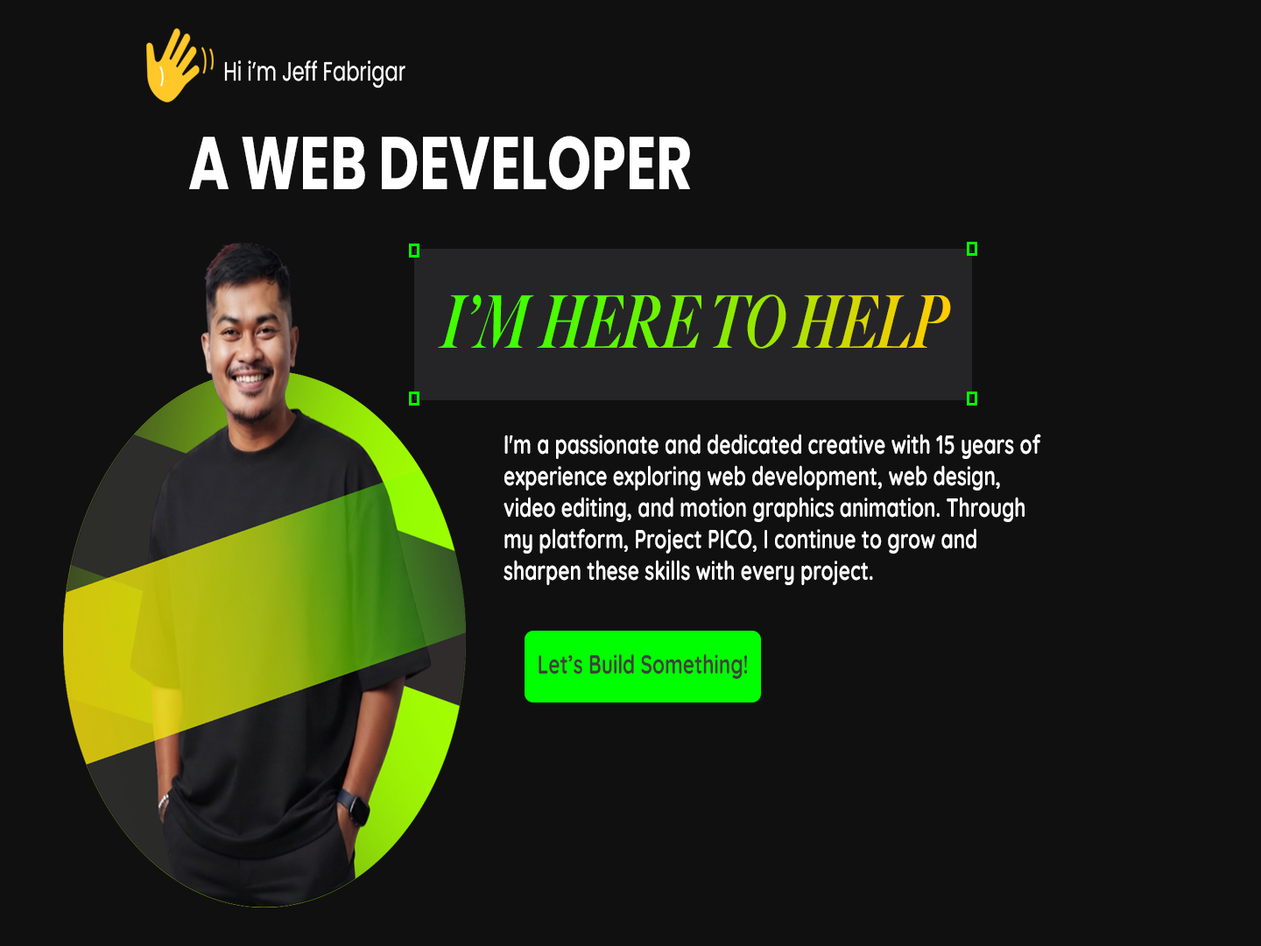
<style>
.page{position:relative;width:1261px;height:946px;background:#101010}
.page>*{position:absolute;margin:0}
.t1{font:26.3px "Poppins-Regular";color:#ffffff;scale:0.75 1}
.t2{font:74.4px "Poppins-Bold";color:#ffffff;scale:0.75 1}
.t3{font:72.7px "Big-Caslon-Black-Italic";scale:0.75 1}
.t4{font:26.3px "Quicksand-Bold";color:#ffffff;scale:0.75 1}
.t5{font:26.3px "Quicksand-Bold";color:#3f4239;scale:0.75 1}
</style>
<div class="page">
<p class="t1" style="left:224px;top:60px;width:181px;height:28px">Hi i’m Jeff Fabrigar</p>
<p class="t2" style="left:189px;top:136px;width:501px;height:54px">A WEB DEVELOPER</p>
<p class="t3" style="left:438px;top:294px;width:513px;height:55px">I’M HERE TO HELP</p>
<p class="t4" style="left:503px;top:433px;width:538px;height:152px">I'm a passionate and dedicated creative with 15 years of experience exploring web development, web design, video editing, and motion graphics animation. Through my platform, Project PICO, I continue to grow and<br>sharpen these skills with every project.</p>
<p class="t5" style="left:539px;top:653px;width:208px;height:26px">Let’s Build Something!</p>
</div>
